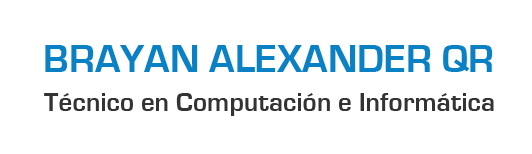
<style>
.page{position:relative;width:532px;height:154px;background:#ffffff}
.page>*{position:absolute;margin:0}
.t1{font:40.1px "EurostileBold";color:#0b81c5}
.t2{font:27.3px "EurostileBold";color:#343333}
</style>
<div class="page">
<p class="t1" style="left:45px;top:45px;width:448px;height:27px">BRAYAN ALEXANDER QR</p>
<p class="t2" style="left:44px;top:93px;width:450px;height:23px">Técnico en Computación e Informática</p>
</div>
